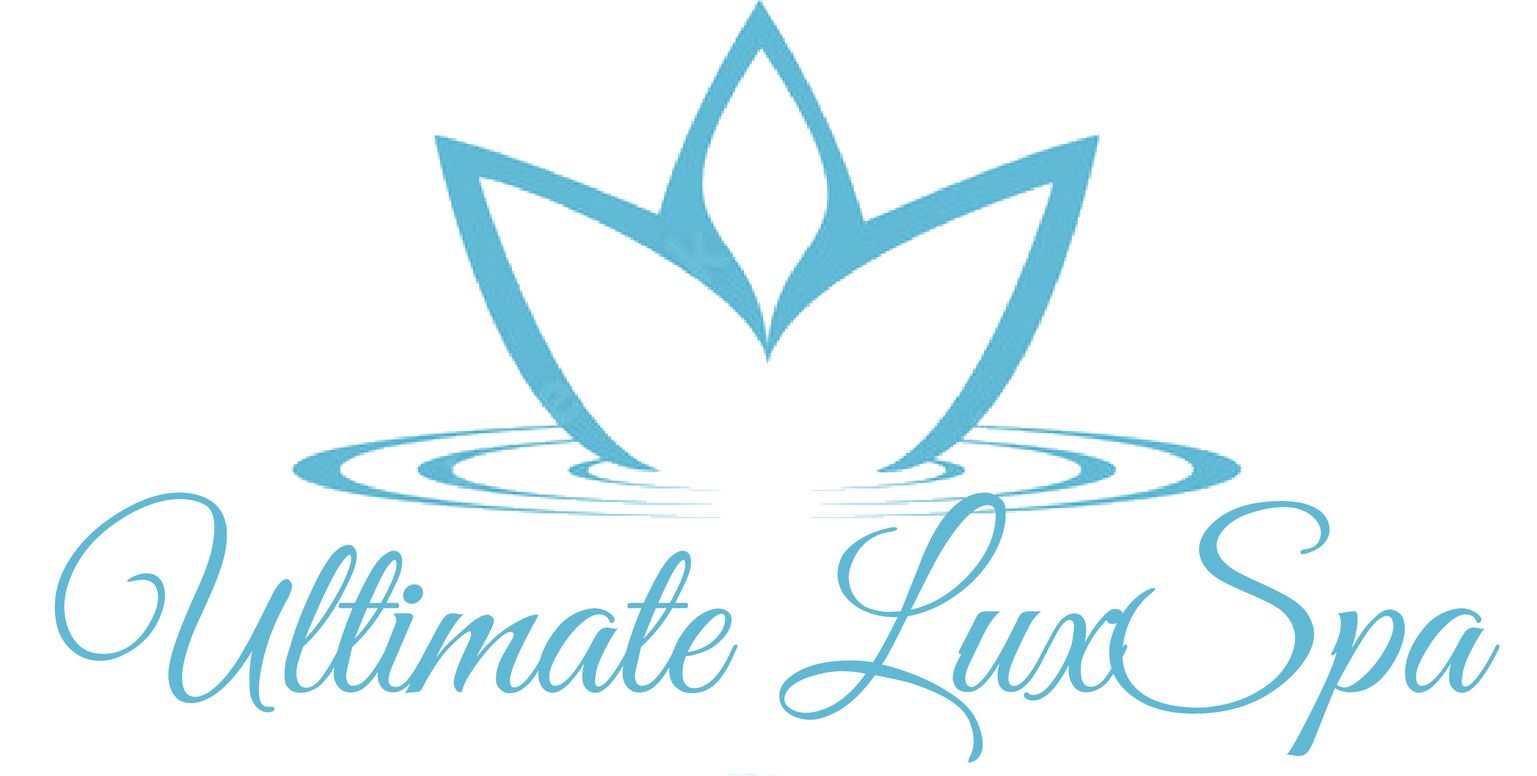
<style>
.page{position:relative;width:1537px;height:776px;background:#ffffff}
.page>*{position:absolute;margin:0}
.t1{font:234.6px "GreatVibes-Regular";color:#60b9d4}
</style>
<div class="page">
<p class="t1" style="left:54px;top:492px;width:1446px;height:271px">Ultimate LuxSpa</p>
</div>
